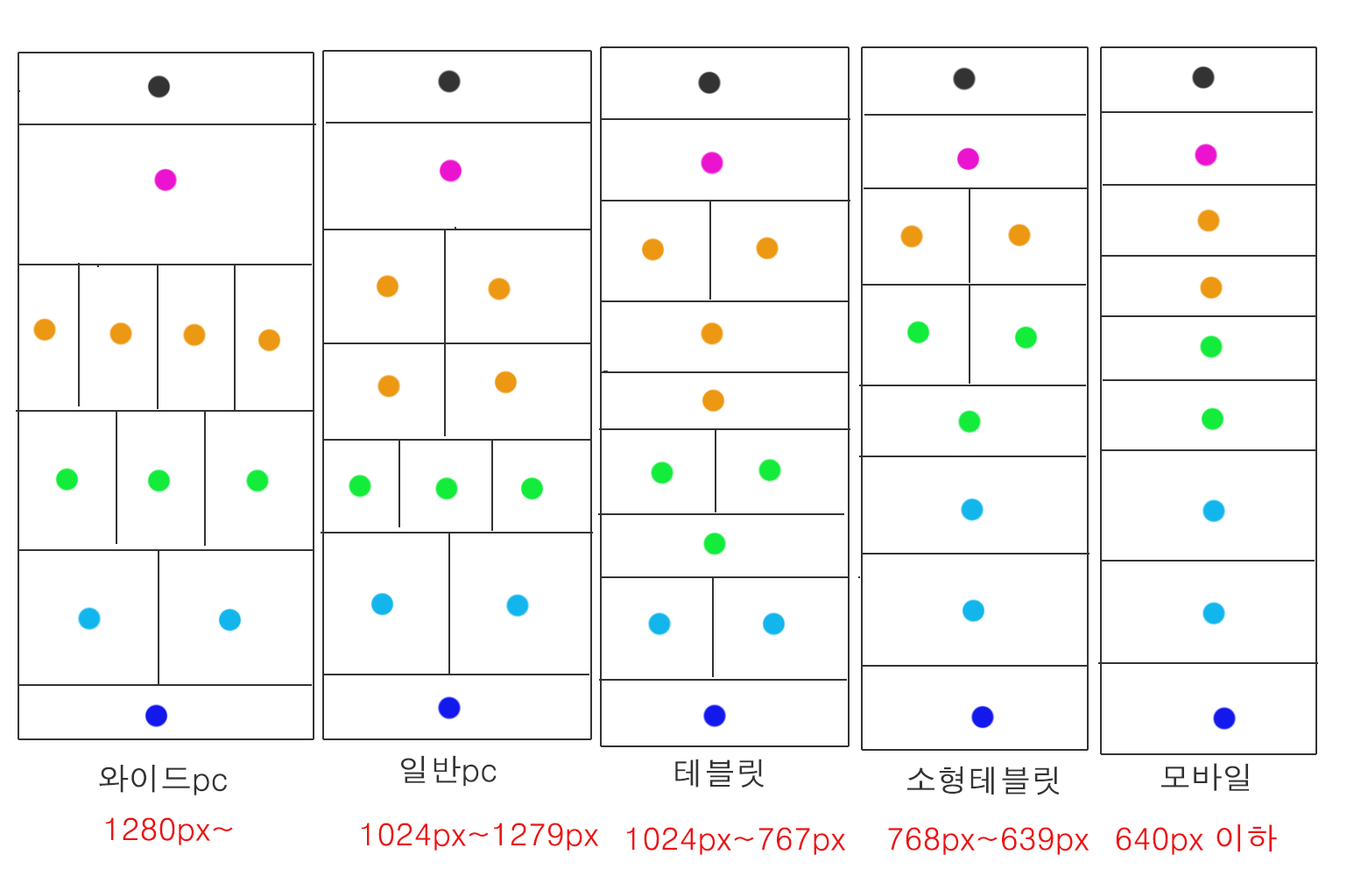
<style>
.page{position:relative;width:1361px;height:876px;background:#ffffff}
.page>*{position:absolute;margin:0}
.t1{font:31.5px "Dotum";color:#333333}
.t2{font:31.5px "Dotum";color:#ec1313}
</style>
<div class="page">
<p class="t1" style="left:401px;top:755px;width:96px;height:32px">일반pc</p>
<p class="t1" style="left:675px;top:759px;width:89px;height:29px">테블릿</p>
<p class="t1" style="left:99px;top:765px;width:128px;height:30px">와이드pc</p>
<p class="t1" style="left:908px;top:766px;width:152px;height:29px">소형테블릿</p>
<p class="t1" style="left:1162px;top:763px;width:87px;height:28px">모바일</p>
<p class="t2" style="left:105px;top:817px;width:128px;height:28px">1280px~</p>
<p class="t2" style="left:361px;top:823px;width:237px;height:28px">1024px~1279px</p>
<p class="t2" style="left:626px;top:827px;width:219px;height:28px">1024px~767px</p>
<p class="t2" style="left:888px;top:827px;width:201px;height:28px">768px~639px</p>
<p class="t2" style="left:1116px;top:824px;width:161px;height:31px">640px 이하</p>
</div>
